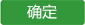
<style>
.page{position:relative;width:85px;height:25px;background:#339839}
.page>*{position:absolute;margin:0}
.t1{font:15px "MicrosoftYaHeiUI";color:#ffffff}
</style>
<div class="page">
<p class="t1" style="left:27px;top:4px;width:30px;height:15px">确定</p>
</div>
